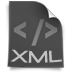
<style>
.page{position:relative;width:72px;height:72px;background:#ffffff}
.page>*{position:absolute;margin:0}
.t1{font:16.2px "PirulenRg-Regular";color:#c2c2c2}
</style>
<div class="page">
<p class="t1" style="left:10px;top:49px;width:52px;height:14px">XML</p>
</div>
